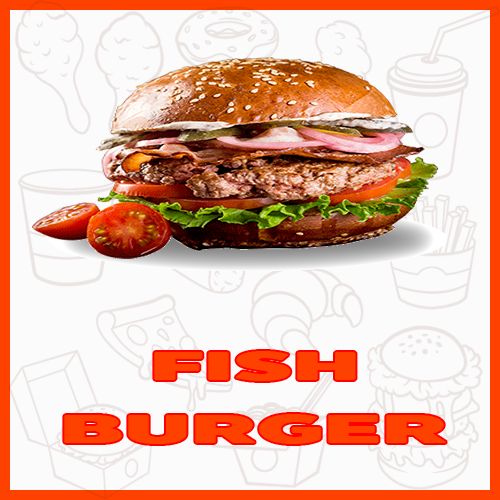
<style>
.page{position:relative;width:500px;height:500px;background:#fbfbfb}
.page>*{position:absolute;margin:0}
.t1{font:40.5px "BoonTook-Mon-Ultra";color:#ff4100;scale:2.16 1}
</style>
<div class="page">
<p class="t1" style="left:154px;top:351px;width:202px;height:30px">FISH</p>
<p class="t1" style="left:64px;top:414px;width:382px;height:30px">BURGER</p>
</div>
